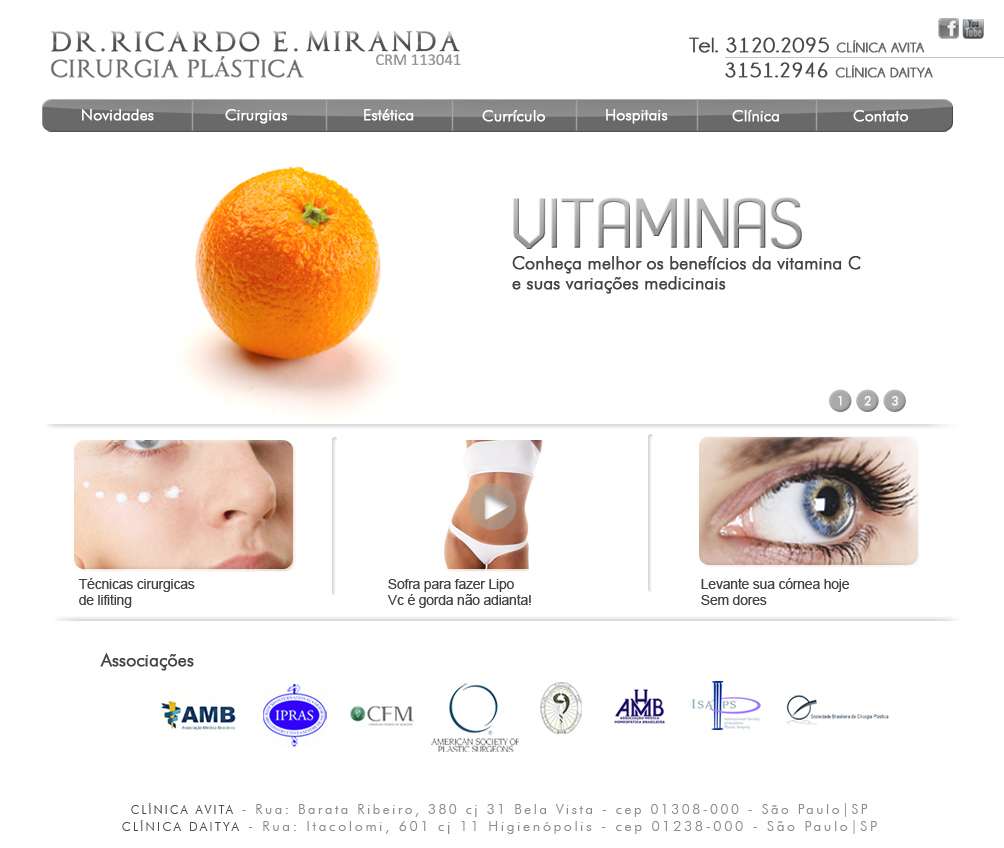
<style>
.page{position:relative;width:1004px;height:848px;background:#ffffff}
.page>*{position:absolute;margin:0}
.t1{font:20.8px/25.8px "Champagne&Limousines";letter-spacing:0.025em;color:#474747;font-weight:bold;scale:1.05 1}
.t2{font:20.8px/25.8px "Champagne&Limousines";letter-spacing:0.025em;color:#696969;font-weight:bold;scale:1.05 1}
.t3{font:13.3px/25.8px "Champagne&Limousines";letter-spacing:0.025em;color:#696969;font-weight:bold;scale:1.05 1}
.t4{font:20.8px/25.8px "Champagne&Limousines";letter-spacing:0.025em;color:#474646;font-weight:bold;scale:1.05 1}
.t5{font:16px "FuturaBT-Light";letter-spacing:-0.015em;color:#f8f8f8;font-weight:bold}
.t6{font:18px/20.3px "FuturaBT-Light";letter-spacing:-0.015em;color:#444343;font-weight:bold}
.t7{font:12px "FuturaBT-Light";letter-spacing:-0.015em;color:#f8f8f8;font-weight:bold}
.t8{font:14px/16px "ArialMT";letter-spacing:-0.015em;color:#444343}
.t9{font:18px "FuturaBT-Light";letter-spacing:-0.015em;color:#444343;font-weight:bold}
.t10{font:13.7px "FuturaBT-Light";letter-spacing:0.185em;color:#8d8c8c}
.t11{font:11.9px "FuturaBT-Light";letter-spacing:0.185em;color:#4b4b4b}
.t12{font:14.3px "FuturaBT-Light";letter-spacing:0.185em;color:#8d8c8c}
.t13{font:12.4px "FuturaBT-Light";letter-spacing:0.185em;color:#4b4b4b}
</style>
<div class="page">
<p class="t1" style="left:689px;top:37px;width:244px;height:41px;text-align:center"><span class="t2">  </span> Tel. 3120.2095 <span class="t3">CLÍNICA AVITA  <br>        </span><span class="t4">3151.2946 </span><span class="t3">CLÍNICA DAITYA</span></p>
<p class="t5" style="left:82px;top:109px;width:72px;height:12px">Novidades</p>
<p class="t5" style="left:225px;top:109px;width:63px;height:15px">Cirurgias</p>
<p class="t5" style="left:364px;top:109px;width:50px;height:12px">Estética</p>
<p class="t5" style="left:482px;top:110px;width:64px;height:12px">Currículo</p>
<p class="t5" style="left:606px;top:109px;width:62px;height:15px">Hospitais</p>
<p class="t5" style="left:732px;top:110px;width:47px;height:12px">Clínica</p>
<p class="t5" style="left:853px;top:110px;width:56px;height:12px">Contato</p>
<p class="t6" style="left:512px;top:256px;width:349px;height:38px">Conheça melhor os benefícios da vitamina C<br>e suas variações medicinais</p>
<p class="t7" style="left:838px;top:396px;width:4px;height:10px">1</p>
<p class="t7" style="left:864px;top:396px;width:7px;height:10px">2</p>
<p class="t7" style="left:892px;top:396px;width:6px;height:10px">3</p>
<p class="t8" style="left:78px;top:578px;width:117px;height:30px">Técnicas cirurgicas<br>de lifiting</p>
<p class="t8" style="left:387px;top:579px;width:144px;height:29px">Sofra para fazer Lipo<br>Vc é gorda não adianta!</p>
<p class="t8" style="left:701px;top:578px;width:148px;height:27px">Levante sua córnea hoje<br>Sem dores</p>
<p class="t9" style="left:100px;top:653px;width:94px;height:18px">Associações</p>
<p class="t10" style="left:131px;top:803px;width:737px;height:14px"><span class="t11">CLÍNICA AVITA</span> - Rua: Barata Ribeiro, 380 cj 31 Bela Vista - cep 01308-000 - São Paulo|SP</p>
<p class="t12" style="left:122px;top:820px;width:755px;height:14px"><span class="t13">CLÍNICA DAITYA</span> - Rua: Itacolomi, 601 cj 11 Higienópolis - cep 01238-000 - São Paulo|SP</p>
</div>
